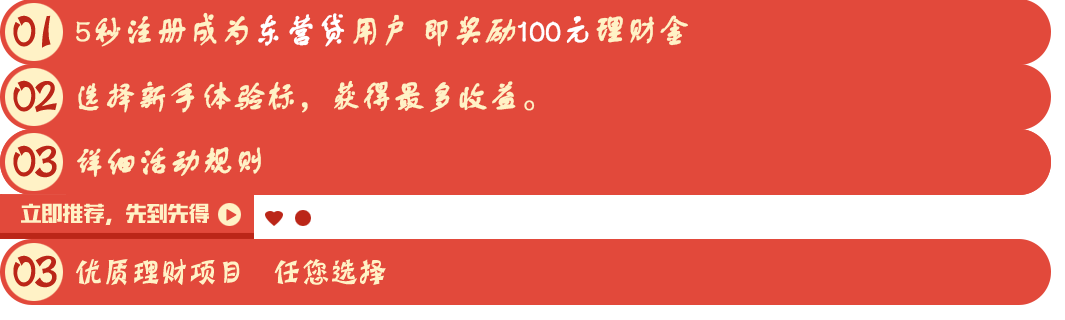
<style>
.page{position:relative;width:1065px;height:320px;background:#e2493b}
.page>*{position:absolute;margin:0}
.t1{font:35px "FZSTK--GBK1-0";color:#fff2c6;font-weight:bold;scale:0.89 1}
.t2{font:35px "FZSTK--GBK1-0";color:#ffffff;font-weight:bold;scale:0.89 1}
</style>
<div class="page">
<p class="t1" style="left:76px;top:12px;width:612px;height:35px">5秒注册成为<span class="t2">东营贷</span>用户 即奖励<span class="t2">100元</span>理财金</p>
<p class="t1" style="left:78px;top:80px;width:457px;height:33px">选择新手体验标，获得最多收益。</p>
<p class="t1" style="left:77px;top:147px;width:184px;height:30px">详细活动规则</p>
</div>
